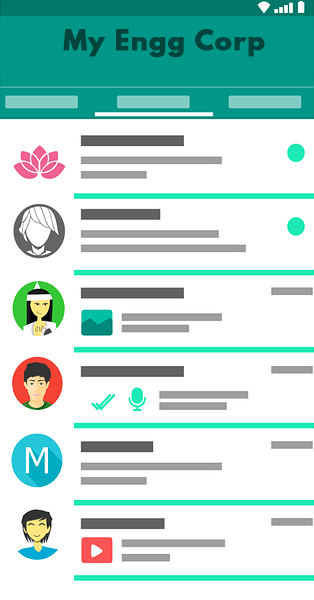
<style>
.page{position:relative;width:314px;height:600px;background:#ffffff}
.page>*{position:absolute;margin:0}
.t1{font:25px "HussarBold";letter-spacing:0.04em;color:#00443e;font-weight:bold}
</style>
<div class="page">
<p class="t1" style="left:63px;top:29px;width:202px;height:29px">My Engg Corp</p>
</div>
